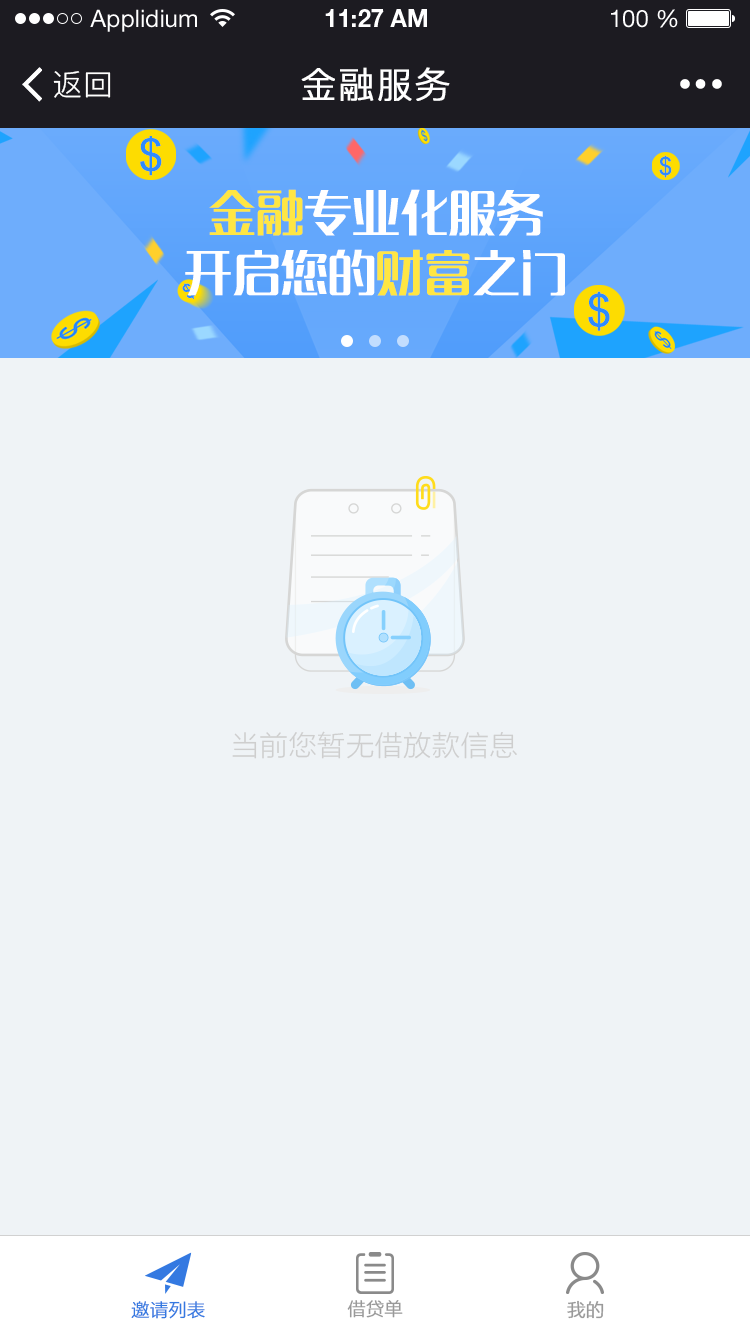
<style>
.page{position:relative;width:750px;height:1334px;background:#eff3f6}
.page>*{position:absolute;margin:0}
.t1{font:24px "HelveticaNeueLTStd-Roman";color:#ffffff}
.t2{font:24px "HelveticaNeueLTStd-Bd";color:#ffffff}
.t3{font:30px "PingFang-SC-Regular";letter-spacing:0.025em;color:#ffffff}
.t4{font:36px "PingFang-SC-Regular";letter-spacing:0.025em;color:#ffffff;font-weight:bold}
.t5{font:48px/60px "MFLangQian_Noncommercial-Regular";color:#ffffff}
.t6{font:48px/60px "MFLangQian_Noncommercial-Regular";color:#ffe643}
.t7{font:28px "FZLTXHK--GBK1-0";letter-spacing:0.025em;color:#cecece}
.t8{font:18px "FZLTXHK--GBK1-0";color:#3479e1;font-weight:bold}
.t9{font:18px "FZLTXHK--GBK1-0";color:#999999;font-weight:bold}
</style>
<div class="page">
<p class="t1" style="left:90px;top:9px;width:107px;height:23px">Applidium</p>
<p class="t2" style="left:325px;top:9px;width:102px;height:18px">11:27 AM</p>
<p class="t1" style="left:611px;top:9px;width:67px;height:19px">100 %</p>
<p class="t3" style="left:53px;top:71px;width:58px;height:27px">返回</p>
<p class="t4" style="left:301px;top:67px;width:149px;height:34px">金融服务</p>
<p class="t5" style="left:185px;top:189px;width:380px;height:107px;text-align:center"><span class="t6">金融</span>专业化服务<br>开启您的<span class="t6">财富</span>之门</p>
<p class="t7" style="left:232px;top:731px;width:285px;height:28px">当前您暂无借放款信息</p>
<p class="t8" style="left:131px;top:1301px;width:74px;height:18px">邀请列表</p>
<p class="t9" style="left:347px;top:1300px;width:56px;height:18px">借贷单</p>
<p class="t9" style="left:567px;top:1300px;width:37px;height:19px">我的</p>
</div>
